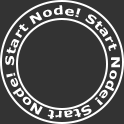
<style>
.page{position:relative;width:124px;height:124px;background:#333333}
.page>*{position:absolute;margin:0}
.t1{font:12px "Verdana-Bold";color:#ffffff;scale:1.25 1}
</style>
<div class="page">
<p class="t1" style="left:5px;top:5px;width:115px;height:114px;text-align:center">Start Node! Start Node! Start Node!</p>
</div>
